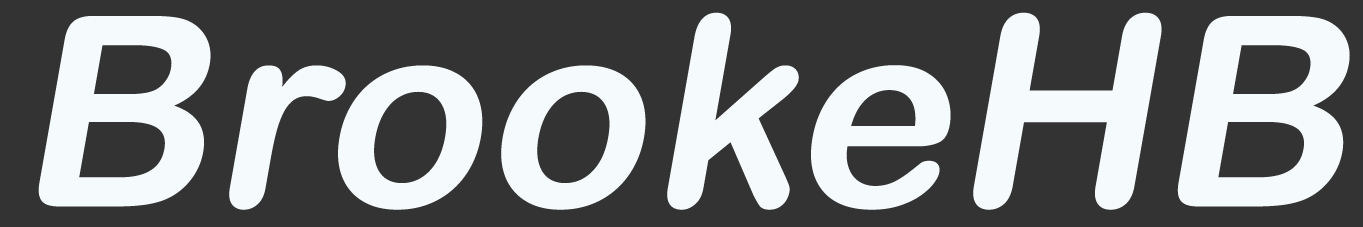
<style>
.page{position:relative;width:1363px;height:227px;background:#333333}
.page>*{position:absolute;margin:0}
.t1{font:265.8px "ArialRoundedMTBold";letter-spacing:0.01em;color:#f5fafc;font-style:italic}
</style>
<div class="page">
<p class="t1" style="left:38px;top:12px;width:1312px;height:198px">BrookeHB</p>
</div>
